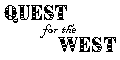
<style>
.page{position:relative;width:120px;height:60px;background:#ffffff}
.page>*{position:absolute;margin:0}
.t1{font:18px "BrimNarrow-Combined1";color:#000000}
.t2{font:16px "BlackadderITC-Regular";color:#000000}
</style>
<div class="page">
<p class="t1" style="left:4px;top:5px;width:63px;height:18px">Quest</p>
<p class="t2" style="left:40px;top:24px;width:36px;height:14px">for the</p>
<p class="t1" style="left:58px;top:37px;width:58px;height:15px">west</p>
</div>
